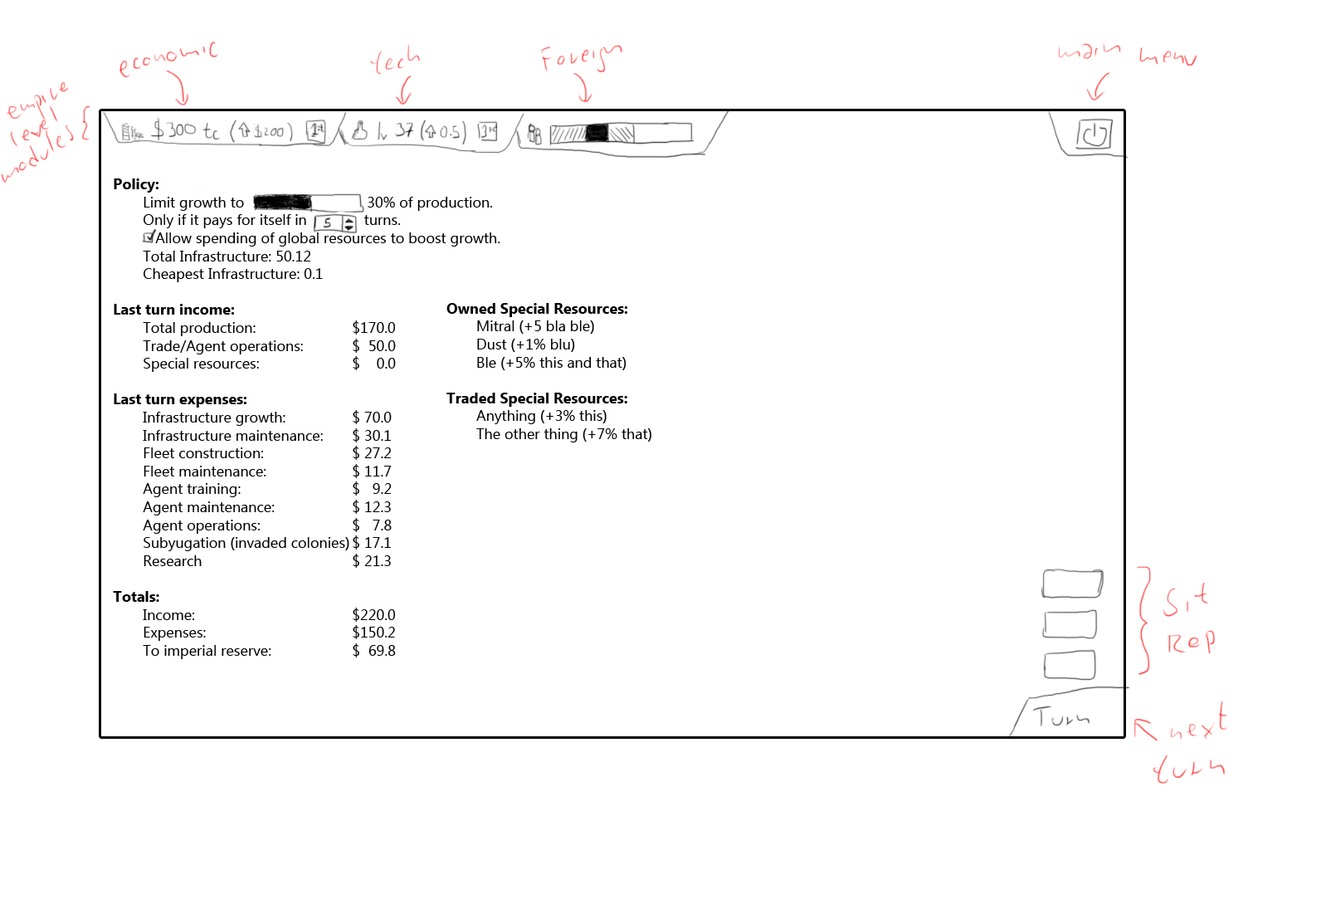
<style>
.page{position:relative;width:1326px;height:899px;background:#ffffff}
.page>*{position:absolute;margin:0}
.t1{font:14.9px "Ebrima";color:#000000}
.t2{font:14.9px "Ebrima-Bold";color:#000000}
</style>
<div class="page">
<p class="t1" style="left:113px;top:178px;width:388px;height:481px"><span class="t2">Policy:<br></span> Limit growth to                              30% of production.<br> Only if it pays for itself in              turns.<br>    Allow spending of global resources to boost growth.<br> Total Infrastructure: 50.12<br> Cheapest Infrastructure: 0.1<br><br><span class="t2">Last turn income:<br></span> Total production:     $170.0<br> Trade/Agent operations:  $  50.0<br> Special resources:    $    0.0<br><br><span class="t2">Last turn expenses:<br></span> Infrastructure growth:   $ 70.0<br> Infrastructure maintenance: $ 30.1<br> Fleet construction:   $ 27.2<br> Fleet maintenance:   $ 11.7<br> Agent training:    $   9.2<br> Agent maintenance:   $ 12.3<br> Agent operations:    $   7.8<br> Subyugation (invaded colonies) $ 17.1  <br> Research      $ 21.3<br><br><span class="t2">Totals:<br></span> Income:      $220.0<br> Expenses:     $150.2<br> To imperial reserve:   $  69.8</p>
<p class="t1" style="left:447px;top:303px;width:205px;height:139px"><span class="t2">Owned Special Resources:<br></span> Mitral (+5 bla ble)<br> Dust (+1% blu)<br> Ble (+5% this and that)<br><span class="t2"><br>Traded Special Resources:<br></span> Anything (+3% this)<br> The other thing (+7% that)</p>
</div>
